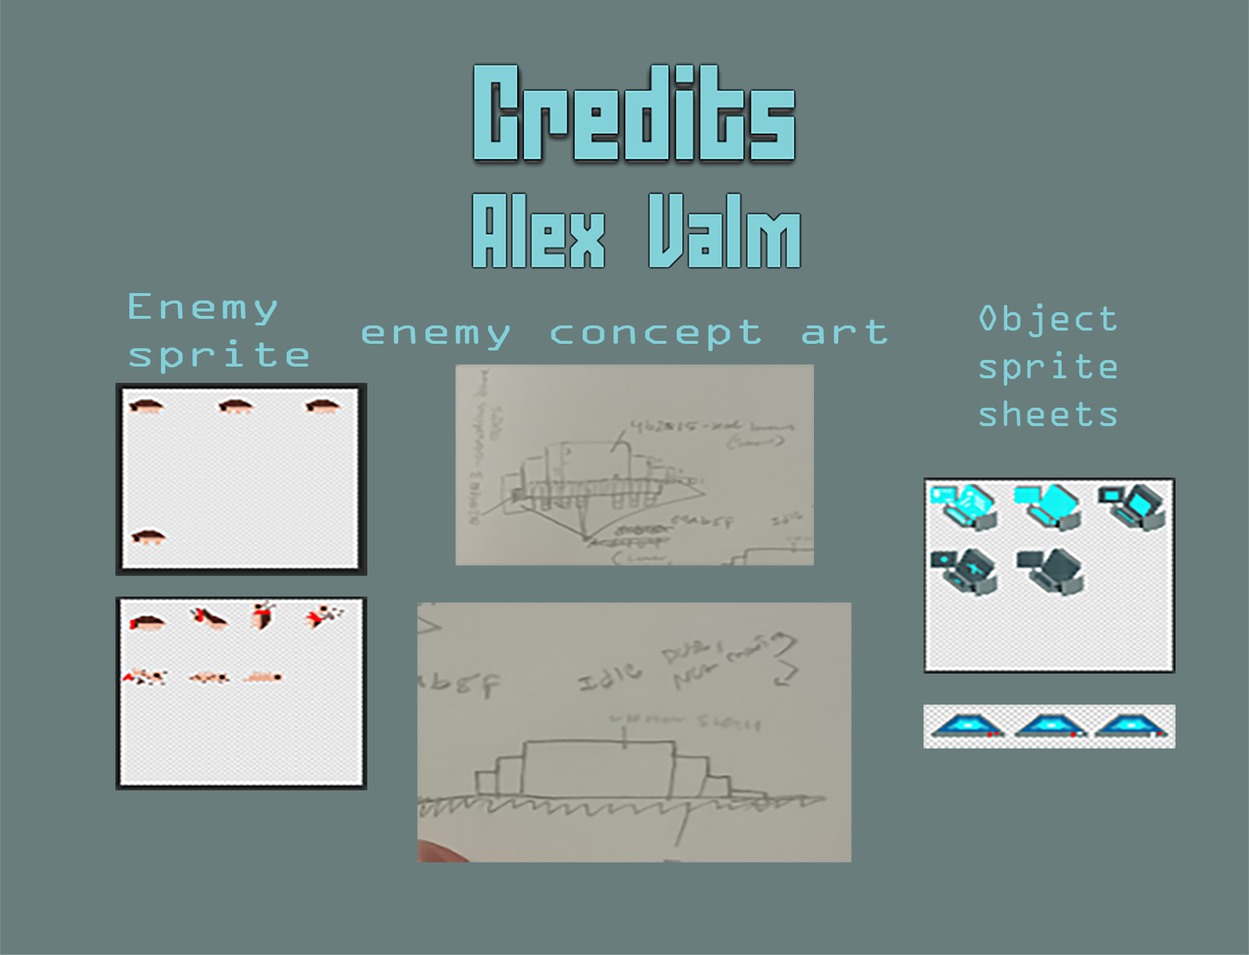
<style>
.page{position:relative;width:1249px;height:955px;background:#697d7d}
.page>*{position:absolute;margin:0}
.t1{font:39.8px "OCRAExtended";color:#82d0d8;scale:1.31 1}
.t2{font:39.8px "OCRAExtended";color:#82d0d8}
</style>
<div class="page">
<p class="t1" style="left:129px;top:293px;width:180px;height:81px">Enemy sprite</p>
<p class="t2" style="left:979px;top:303px;width:138px;height:123px">Object sprite sheets</p>
<p class="t1" style="left:362px;top:320px;width:525px;height:31px">enemy concept art</p>
</div>
